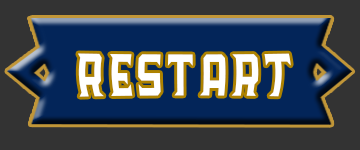
<style>
.page{position:relative;width:360px;height:150px;background:#333333}
.page>*{position:absolute;margin:0}
.t1{font:62.5px "Lorde-Havana";letter-spacing:0.1em;color:#ffffff;scale:0.75 1}
</style>
<div class="page">
<p class="t1" style="left:78px;top:53px;width:213px;height:44px">REstart</p>
</div>
